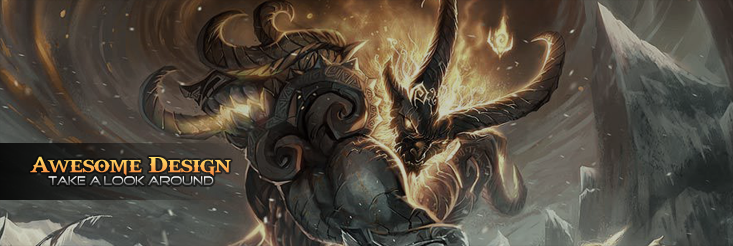
<style>
.page{position:relative;width:733px;height:246px}
.page>*{position:absolute;margin:0}
.t1{font:24px "GodOfWar";letter-spacing:-0.04em}
.t2{font:12px "GoodTimes";letter-spacing:-0.04em}
</style>
<div class="page">
<p class="t1" style="left:30px;top:156px;width:201px;height:20px">Awesome Design</p>
<p class="t2" style="left:48px;top:176px;width:166px;height:9px">TAKE A LOOK AROUND</p>
</div>
